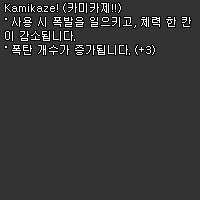
<style>
.page{position:relative;width:200px;height:200px;background:#333333}
.page>*{position:absolute;margin:0}
.t1{font:11px/14px "Dotum";color:#ffffff}
</style>
<div class="page">
<p class="t1" style="left:5px;top:3px;width:186px;height:52px">Kamikaze! (카미카제!!)<br>˚ 사용 시 폭발을 일으키고, 체력 한 칸<br>이 감소됩니다.<br>˚ 폭탄 개수가 증가됩니다. (+3)</p>
</div>
